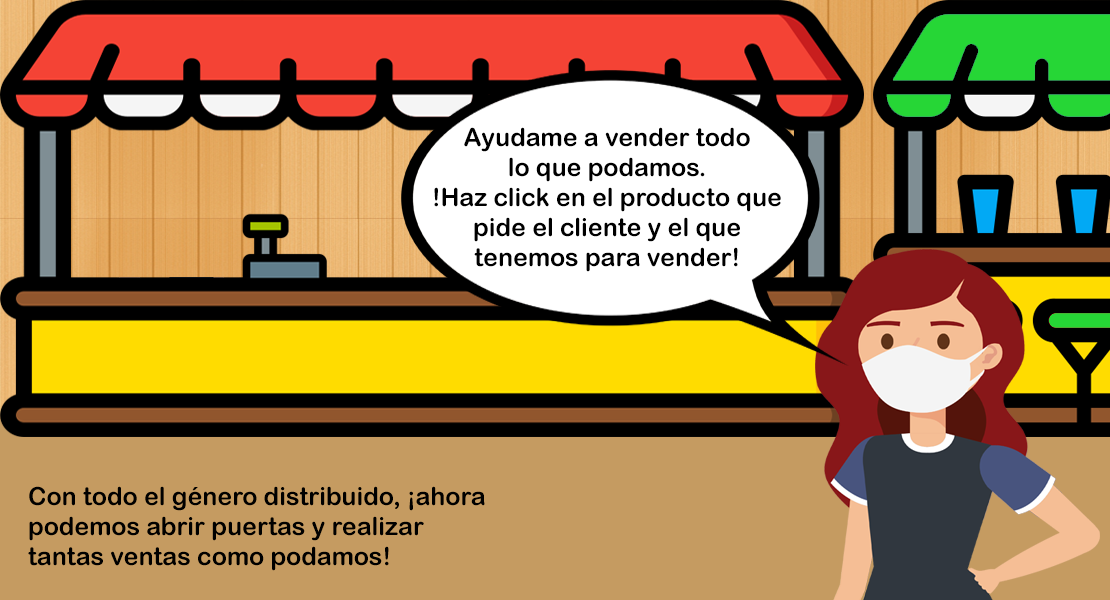
<style>
.page{position:relative;width:1110px;height:600px;background:#c59b61}
.page>*{position:absolute;margin:0}
.t1{font:25px "ArialRoundedMTBold";color:#000000}
</style>
<div class="page">
<p class="t1" style="left:434px;top:127px;width:347px;height:145px;text-align:center">Ayudame a vender todo<br>lo que podamos.<br>!Haz click en el producto que<br>pide el cliente y el que<br>tenemos para vender!</p>
<p class="t1" style="left:28px;top:486px;width:457px;height:85px">Con todo el género distribuido, ¡ahora<br>podemos abrir puertas y realizar<br>tantas ventas como podamos!</p>
</div>
